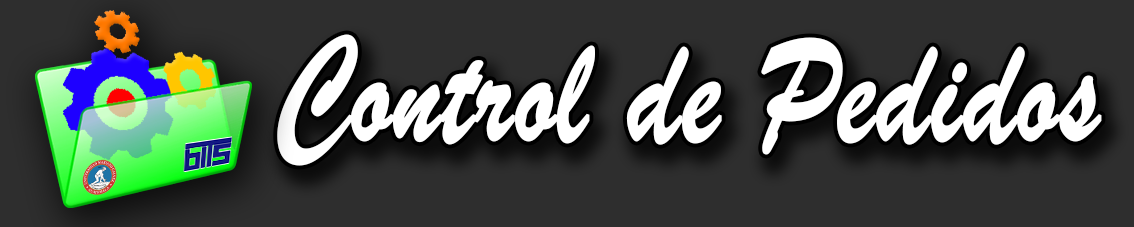
<style>
.page{position:relative;width:1134px;height:227px;background:#2e2e2e}
.page>*{position:absolute;margin:0}
.t1{font:159.4px "BrushScriptMT";color:#ffffff;font-weight:bold;scale:0.78 1}
</style>
<div class="page">
<p class="t1" style="left:277px;top:34px;width:825px;height:132px">Control de Pedidos</p>
</div>
